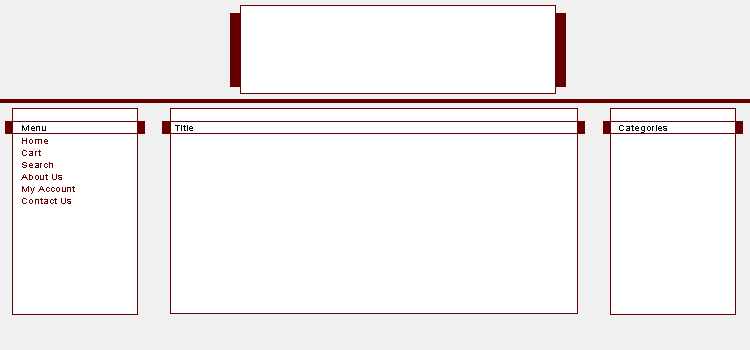
<style>
.page{position:relative;width:750px;height:350px;background:#ffffff}
.page>*{position:absolute;margin:0}
.t1{font:9px "ArialMT";color:#000000;scale:1.15 1}
.t2{font:9px/12px "ArialMT";color:#660000;scale:1.15 1}
</style>
<div class="page">
<p class="t1" style="left:22px;top:125px;width:24px;height:6px">Menu</p>
<p class="t1" style="left:175px;top:125px;width:18px;height:6px">Title</p>
<p class="t1" style="left:619px;top:125px;width:48px;height:8px">Categories</p>
<p class="t2" style="left:21px;top:138px;width:54px;height:66px">Home<br>Cart<br>Search<br>About Us<br>My Account<br>Contact Us</p>
</div>
